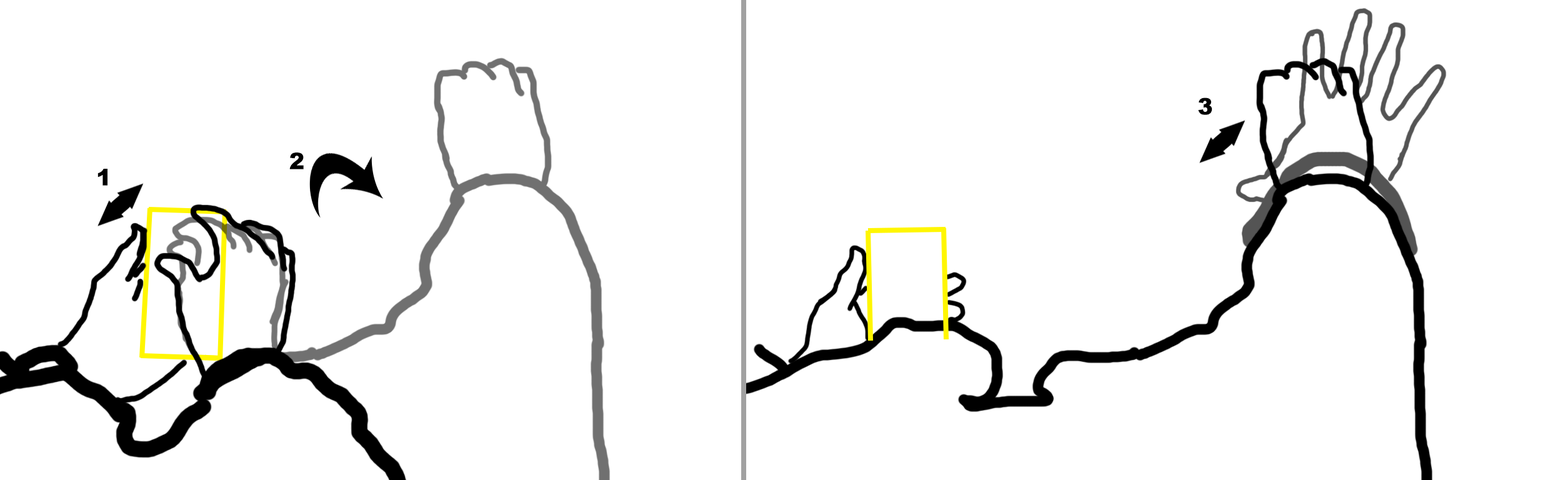
<style>
.page{position:relative;width:1568px;height:480px;background:#ffffff}
.page>*{position:absolute;margin:0}
.t1{font:22.5px "Arial-Black";color:#000000;font-weight:bold}
</style>
<div class="page">
<p class="t1" style="left:1198px;top:97px;width:14px;height:18px">3</p>
<p class="t1" style="left:289px;top:152px;width:15px;height:17px">2</p>
<p class="t1" style="left:97px;top:169px;width:10px;height:17px">1</p>
</div>
